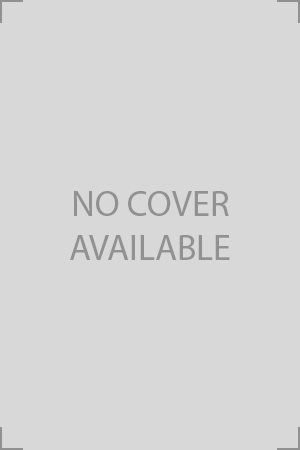
<style>
.page{position:relative;width:300px;height:450px;background:#d8d8d8}
.page>*{position:absolute;margin:0}
.t1{font:36px "MyriadPro-Regular";color:#919191}
.t2{font:36px "MyriadPro-Regular";color:#bababa}
</style>
<div class="page">
<p class="t1" style="left:70px;top:191px;width:160px;height:69px;text-align:center"><span class="t2"><br><br><br><br></span>NO COVER<br>AVAILABLE</p>
</div>
